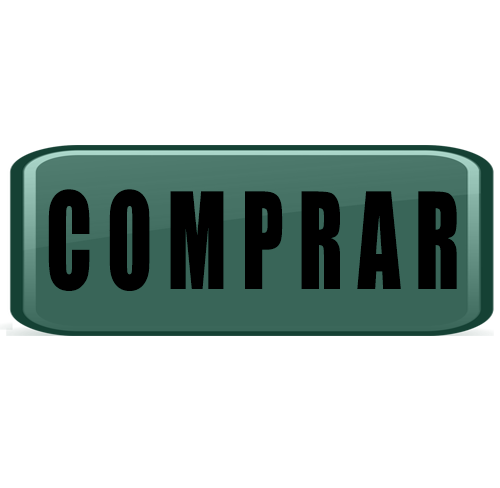
<style>
.page{position:relative;width:500px;height:488px;background:#ffffff}
.page>*{position:absolute;margin:0}
.t1{font:123.2px "Impact";color:#000000;scale:0.68 1}
.t2{font:259px "Impact";color:#f7f3f3;scale:0.68 1}
</style>
<div class="page">
<p class="t1" style="left:48px;top:189px;width:409px;height:102px"><span class="t2"> </span>C O M P R A R</p>
</div>
